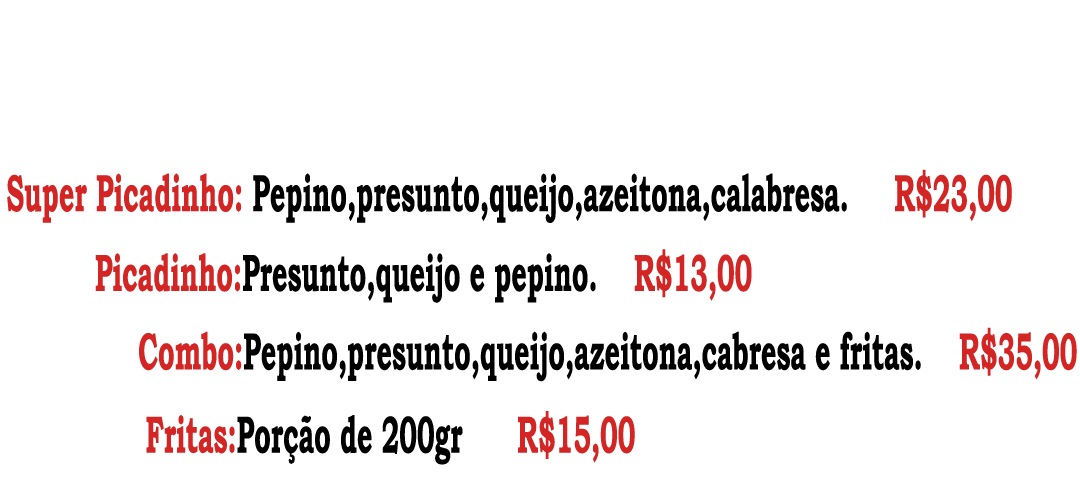
<style>
.page{position:relative;width:1080px;height:500px;background:#ffffff}
.page>*{position:absolute;margin:0}
.t1{font:52.5px "BookmanOldStyle-Bold";color:#000000;scale:0.51 1}
.t2{font:52.5px "BookmanOldStyle-Bold";color:#d42525;scale:0.51 1}
</style>
<div class="page">
<p class="t1" style="left:7px;top:169px;width:1005px;height:54px"><span class="t2">Super Picadinho:</span> Pepino,presunto,queijo,azeitona,calabresa.     <span class="t2">R$23,00</span></p>
<p class="t1" style="left:95px;top:249px;width:657px;height:54px"><span class="t2">Picadinho:</span>Presunto,queijo e pepino.    <span class="t2">R$13,00</span></p>
<p class="t1" style="left:139px;top:327px;width:938px;height:55px"><span class="t2">Combo:</span>Pepino,presunto,queijo,azeitona,cabresa e fritas.    <span class="t2">R$35,00</span></p>
<p class="t1" style="left:146px;top:411px;width:489px;height:54px"><span class="t2">Fritas:</span>Porção de 200gr      <span class="t2">R$15,00</span></p>
</div>
